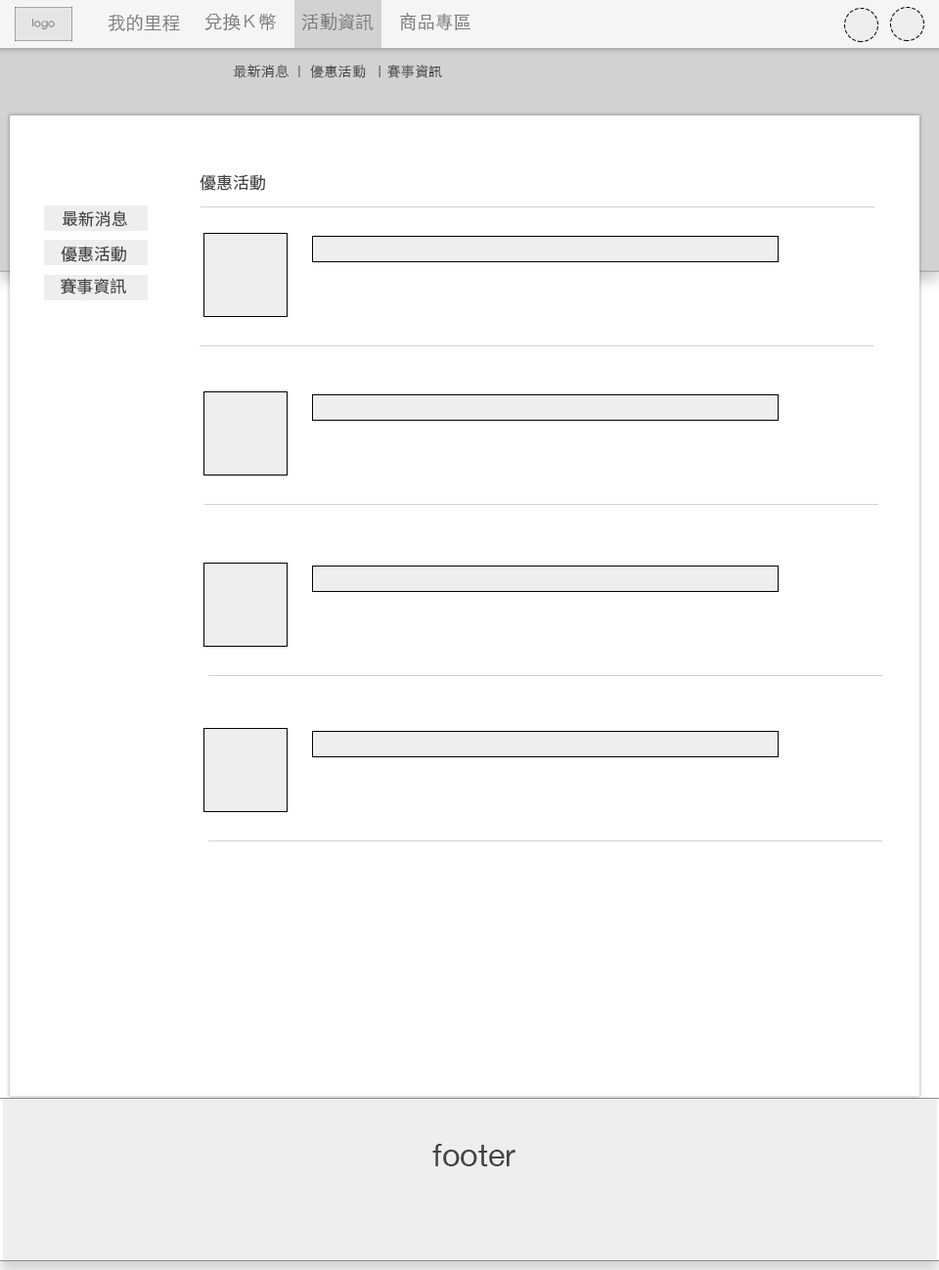
<style>
.page{position:relative;width:939px;height:1270px;background:#ffffff}
.page>*{position:absolute;margin:0}
.t1{font:18.1px "STHeitiTC-Light";color:#7d7d7d}
.t2{font:10.4px "STHeitiTC-Light";color:#7d7d7d}
.t3{font:14px "STHeitiTC-Light";color:#434343}
.t4{font:16.6px "NotoSansMonoCJKtc-Regular";color:#464646}
.t5{font:31.6px "HelveticaNeue";color:#434343}
</style>
<div class="page">
<p class="t1" style="left:108px;top:14px;width:72px;height:17px">我的里程</p>
<p class="t1" style="left:204px;top:14px;width:72px;height:16px">兌換Ｋ幣</p>
<p class="t1" style="left:301px;top:13px;width:73px;height:17px">活動資訊</p>
<p class="t1" style="left:400px;top:13px;width:71px;height:17px">商品專區</p>
<p class="t2" style="left:32px;top:19px;width:23px;height:10px">logo</p>
<p class="t2" style="left:32px;top:19px;width:23px;height:10px">logo</p>
<p class="t3" style="left:233px;top:65px;width:209px;height:13px">最新消息 ｜ 優惠活動  ｜賽事資訊</p>
<p class="t4" style="left:200px;top:174px;width:65px;height:17px">優惠活動</p>
<p class="t4" style="left:63px;top:210px;width:64px;height:17px">最新消息</p>
<p class="t4" style="left:61px;top:246px;width:65px;height:16px">優惠活動</p>
<p class="t4" style="left:61px;top:278px;width:65px;height:16px">賽事資訊</p>
<p class="t5" style="left:432px;top:1144px;width:84px;height:22px">footer</p>
</div>
